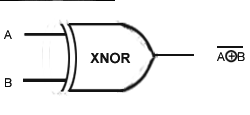
<style>
.page{position:relative;width:250px;height:115px;background:#ffffff}
.page>*{position:absolute;margin:0}
.t1{font:12px "ArialMT";color:#131313}
.t2{font:14px "Arial-BoldMT";color:#131313}
.t3{font:12px "ArialMT";color:#0d0d0d}
</style>
<div class="page">
<p class="t1" style="left:4px;top:30px;width:8px;height:9px">A</p>
<p class="t2" style="left:90px;top:52px;width:41px;height:12px">XNOR</p>
<p class="t1" style="left:217px;top:52px;width:8px;height:9px">A</p>
<p class="t1" style="left:238px;top:52px;width:7px;height:9px">B</p>
<p class="t3" style="left:5px;top:78px;width:7px;height:9px">B</p>
</div>
